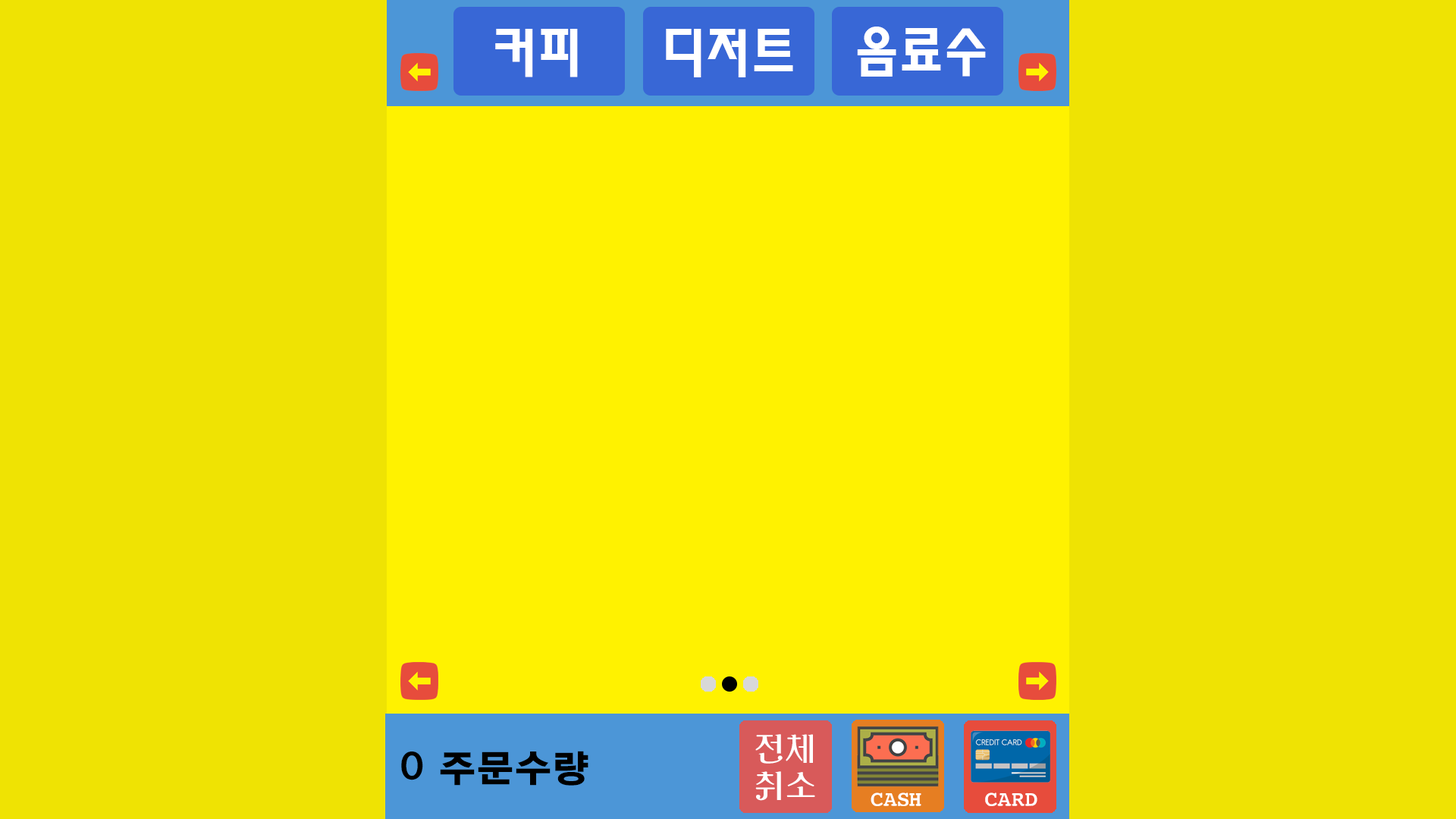
<style>
.page{position:relative;width:1456px;height:819px;background:#efe303}
.page>*{position:absolute;margin:0}
.t1{font:54.6px "MoeumTXB-HM";color:#ffffff}
.t2{font:31.1px "(ÇÑ)¹°¹æ¿ïB";color:#ffffff}
.t3{font:37.9px "YDIYGO160-KSCPC-EUC-H";color:#000000}
.t4{font:37.9px "(ÇÑ)¹°¹æ¿ïB";color:#000000}
.t5{font:19px "(ÇÑ)¹°¹æ¿ïB";color:#ffffff}
</style>
<div class="page">
<p class="t1" style="left:495px;top:29px;width:83px;height:48px">커피</p>
<p class="t1" style="left:666px;top:29px;width:127px;height:48px">디저트</p>
<p class="t1" style="left:857px;top:27px;width:129px;height:50px">음료수</p>
<p class="t2" style="left:755px;top:734px;width:60px;height:67px">전체<br>취소</p>
<p class="t3" style="left:401px;top:751px;width:187px;height:35px"><span class="t4">0 </span>주문수량</p>
<p class="t5" style="left:871px;top:792px;width:50px;height:14px">CASH</p>
<p class="t5" style="left:985px;top:792px;width:52px;height:14px">CARD</p>
</div>
